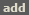
<style>
.page{position:relative;width:29px;height:15px;background:#5a5a5a}
.page>*{position:absolute;margin:0}
.t1{font:11px "Verdana-Bold";color:#dedbcb}
</style>
<div class="page">
<p class="t1" style="left:3px;top:3px;width:22px;height:9px">add</p>
</div>
